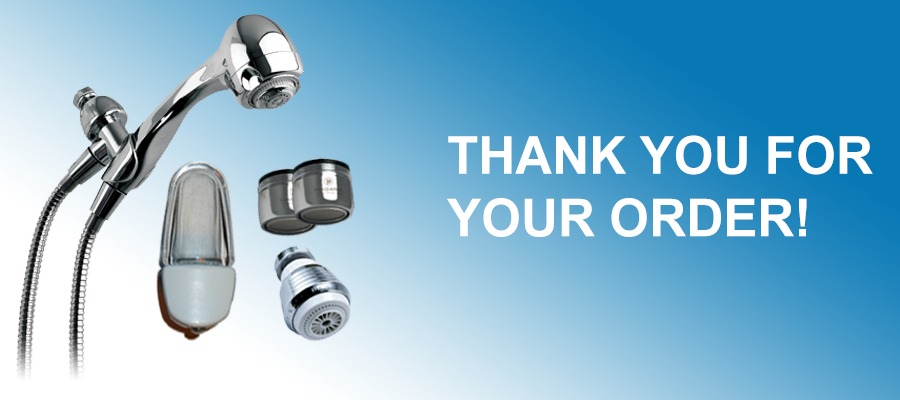
<style>
.page{position:relative;width:900px;height:400px}
.page>*{position:absolute;margin:0}
.t1{font:52.2px "Arial-BoldMT";color:#ffffff}
</style>
<div class="page">
<p class="t1" style="left:447px;top:135px;width:426px;height:102px">THANK YOU FOR<br>YOUR ORDER!</p>
</div>
